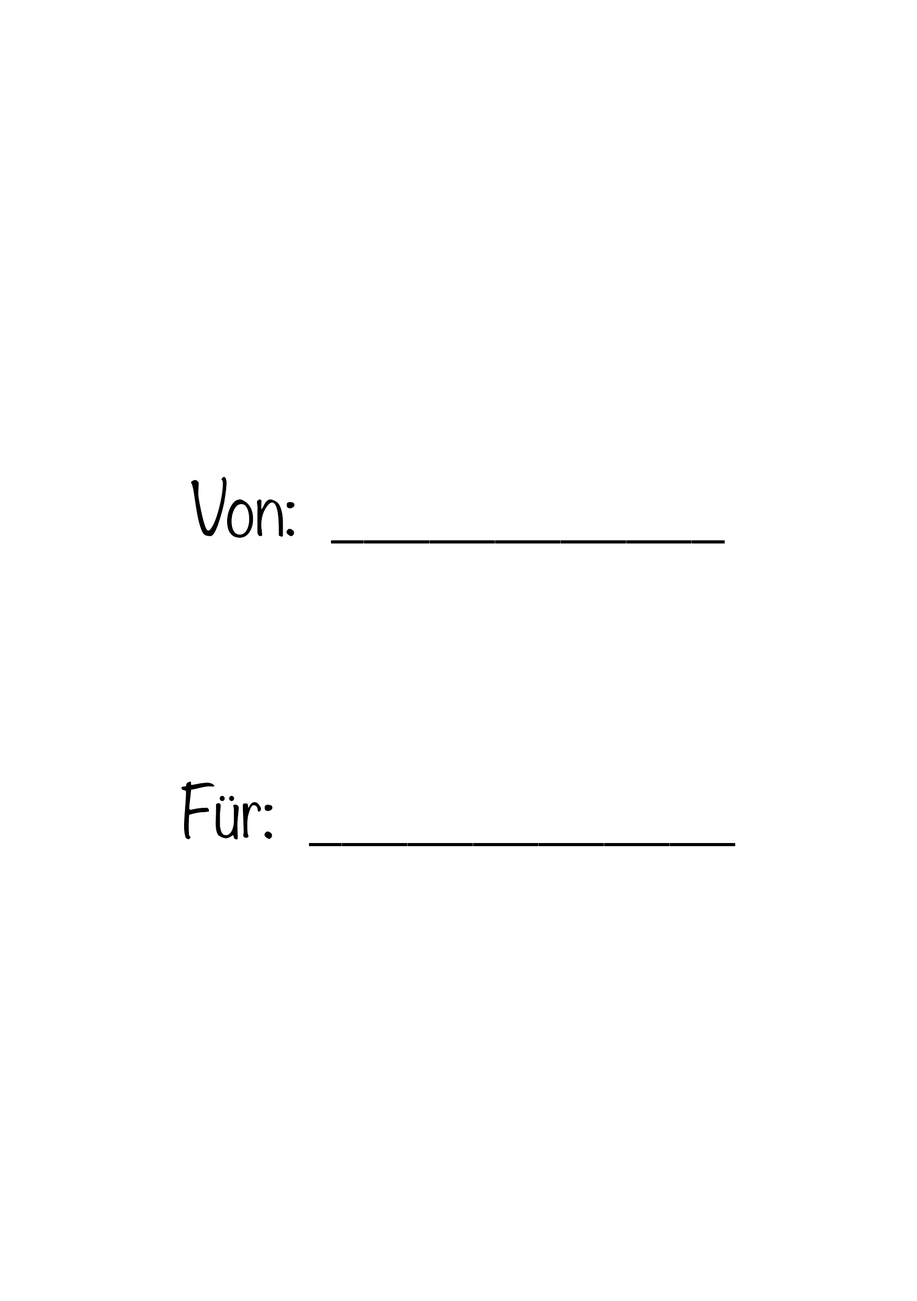
<style>
.page{position:relative;width:917px;height:1301px;background:#ffffff}
.page>*{position:absolute;margin:0}
.t1{font:65.6px "Helvetica-Light";color:#000000}
.t2{font:65.6px "Noteworthy-Light";color:#000000}
</style>
<div class="page">
<p class="t1" style="left:191px;top:477px;width:534px;height:66px"><span class="t2">Von:  </span>____________</p>
<p class="t1" style="left:181px;top:781px;width:554px;height:65px"><span class="t2">Für:  </span>_____________</p>
</div>
